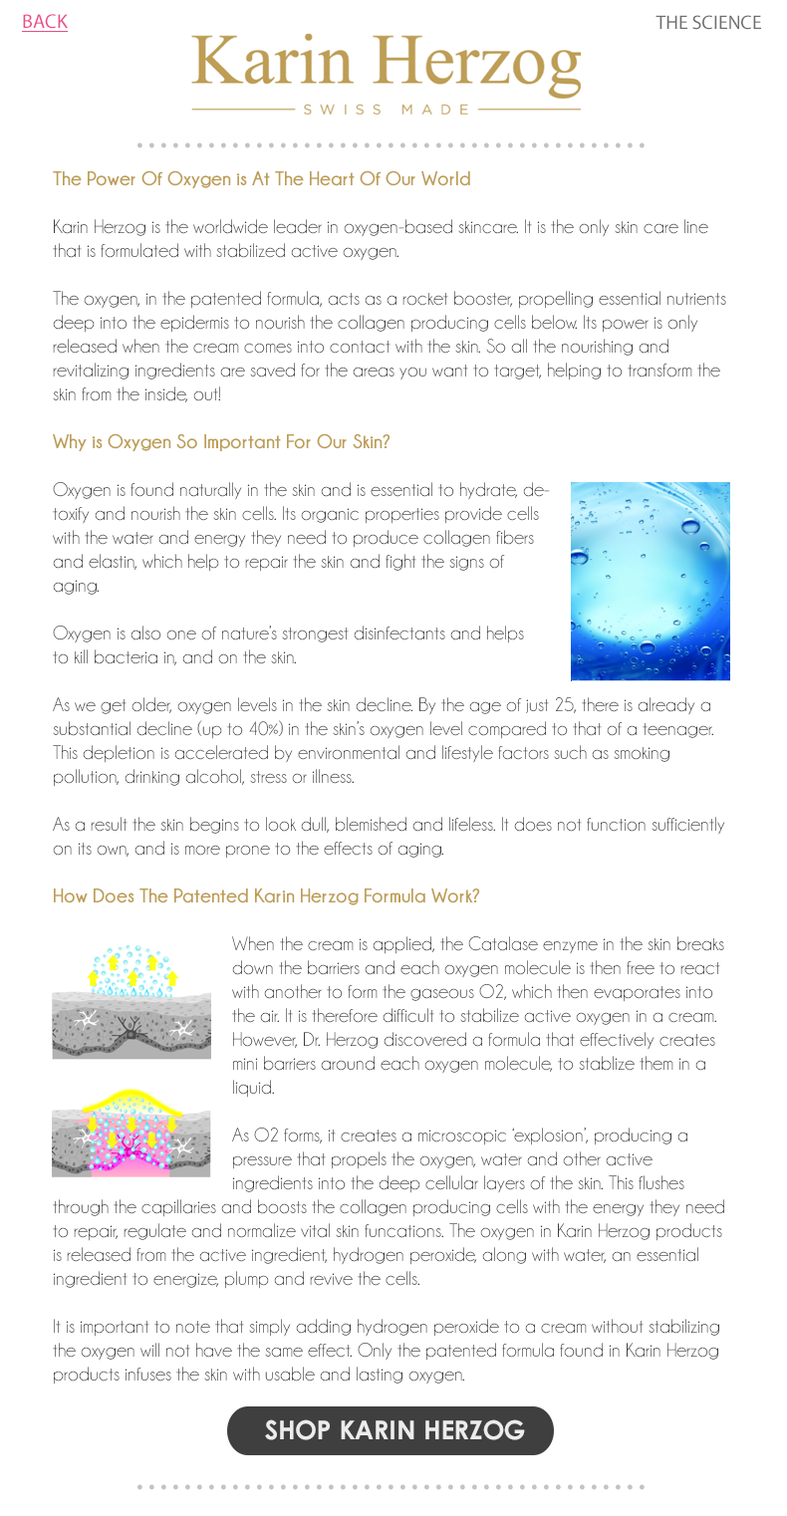
<style>
.page{position:relative;width:787px;height:1516px;background:#ffffff}
.page>*{position:absolute;margin:0}
.t1{font:19.9px "MyriadPro-Regular";color:#ea4c87;text-decoration:underline}
.t2{font:19.4px "MyriadPro-Regular";color:#6e6e6e}
.t3{font:39.8px "MyriadPro-Regular";letter-spacing:0.1em;color:#c4c2c2}
.t4{font:19.9px/23.9px "Champagne&Limousines";color:#3c3c3c}
.t5{font:19.9px/23.9px "Champagne&Limousines-Bold";color:#bd9d54}
.t6{font:25.9px "CenturyGothic-Bold";color:#ececec}
</style>
<div class="page">
<p class="t1" style="left:22px;top:14px;width:47px;height:18px">BACK</p>
<p class="t2" style="left:655px;top:15px;width:106px;height:15px">THE SCIENCE</p>
<p class="t3" style="left:137px;top:142px;width:507px;height:6px">...........................................</p>
<p class="t4" style="left:53px;top:170px;width:673px;height:1214px"><span class="t5">The Power Of Oxygen is At The Heart Of Our World<br><br></span>Karin Herzog is the worldwide leader in oxygen-based skincare. It is the only skin care line that is formulated with stabilized active oxygen.<br><br>The oxygen, in the patented formula, acts as a rocket booster, propelling essential nutrients deep into the epidermis to nourish the collagen producing cells below. Its power is only released when the cream comes into contact with the skin. So all the nourishing and revitalizing ingredients are saved for the areas you want to target, helping to transform the skin from the inside, out!<br><span class="t5"><br>Why is Oxygen So Important For Our Skin?<br><br></span>Oxygen is found naturally in the skin and is essential to hydrate, de-<br>toxify and nourish the skin cells. Its organic properties provide cells <br>with the water and energy they need to produce collagen fibers<br>and elastin, which help to repair the skin and fight the signs of<br>aging.<br><br>Oxygen is also one of nature’s strongest disinfectants and helps<br>to kill bacteria in, and on the skin.<br><br>As we get older, oxygen levels in the skin decline. By the age of just 25, there is already a substantial decline (up to 40%) in the skin’s oxygen level compared to that of a teenager. This depletion is accelerated by environmental and lifestyle factors such as smoking pollution, drinking alcohol, stress or illness.<br><br>As a result the skin begins to look dull, blemished and lifeless. It does not function sufficiently on its own, and is more prone to the effects of aging.<br><br><span class="t5">How Does The Patented Karin Herzog Formula Work?<br><br></span>     When the cream is applied, the Catalase enzyme in the skin breaks       down the barriers and each oxygen molecule is then free to react       with another to form the gaseous O2, which then evaporates into       the air. It is therefore difficult to stabilize active oxygen in a cream.       However, Dr. Herzog discovered a formula that effectively creates       mini barriers around each oxygen molecule, to stablize them in a       liquid.<br><br>     As O2 forms, it creates a microscopic ‘explosion’, producing a        pressure that propels the oxygen, water and other active         ingredients into the deep cellular layers of the skin. This flushes through the capillaries and boosts the collagen producing cells with the energy they need to repair, regulate and normalize vital skin funcations. The oxygen in Karin Herzog products is released from the active ingredient, hydrogen peroxide, along with water, an essential ingredient to energize, plump and revive the cells.<br><br>It is important to note that simply adding hydrogen peroxide to a cream without stabilizing the oxygen will not have the same effect. Only the patented formula found in Karin Herzog products infuses the skin with usable and lasting oxygen.</p>
<p class="t6" style="left:265px;top:1419px;width:260px;height:21px">SHOP KARIN HERZOG</p>
<p class="t3" style="left:137px;top:1484px;width:507px;height:6px">...........................................</p>
</div>
